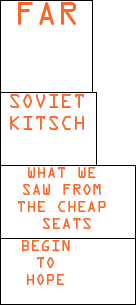
<style>
.page{position:relative;width:136px;height:305px;background:#ffffff}
.page>*{position:absolute;margin:0}
.t1{font:30px "OCRAStd";color:#fa6729}
.t2{font:18px "OCRAStd";color:#fa6729}
.t3{font:14px "OCRAStd";color:#fa6729}
</style>
<div class="page">
<p class="t1" style="left:18px;top:2px;width:58px;height:23px">FAR</p>
<p class="t2" style="left:10px;top:94px;width:74px;height:36px">SOVIET<br>KITSCH</p>
<p class="t3" style="left:18px;top:167px;width:88px;height:62px;text-align:center">WHAT WE <br>SAW FROM <br>THE CHEAP <br>SEATS</p>
<p class="t3" style="left:22px;top:240px;width:48px;height:45px;text-align:center">BEGIN<br>TO<br>HOPE</p>
</div>
